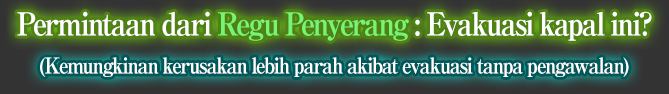
<style>
.page{position:relative;width:669px;height:94px}
.page>*{position:absolute;margin:0}
.t1{font:32px "RyuminPro-ExBold";letter-spacing:-0.08em;color:#ffffff;scale:0.9 1}
.t2{font:32px "RyuminPro-ExBold";letter-spacing:-0.08em;color:#75f475;scale:0.9 1}
.t3{font:22px "RyuminPro-ExBold";letter-spacing:-0.08em;color:#ffffff;scale:0.9 1}
</style>
<div class="page">
<p class="t1" style="left:17px;top:11px;width:635px;height:30px">Permintaan dari <span class="t2">Regu Penyerang</span> : Evakuasi kapal ini?</p>
<p class="t3" style="left:40px;top:57px;width:589px;height:20px">(Kemungkinan kerusakan lebih parah akibat evakuasi tanpa pengawalan)</p>
</div>
